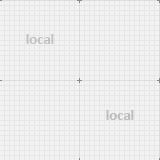
<style>
.page{position:relative;width:160px;height:160px;background:#f2f2f2}
.page>*{position:absolute;margin:0}
.t1{font:14.8px "Calibri-Bold";color:#c4c4c4}
.t2{font:14.8px "Calibri-Bold";color:#bdbdbd}
</style>
<div class="page">
<p class="t1" style="left:26px;top:34px;width:28px;height:10px">local</p>
<p class="t2" style="left:106px;top:110px;width:28px;height:10px">local</p>
</div>
